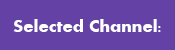
<style>
.page{position:relative;width:175px;height:50px;background:#6441a5}
.page>*{position:absolute;margin:0}
.t1{font:18px "Aharoni-Bold";color:#ffffff}
</style>
<div class="page">
<p class="t1" style="left:13px;top:19px;width:148px;height:13px">Selected Channel:</p>
</div>
